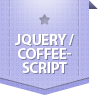
<style>
.page{position:relative;width:100px;height:100px;background:#ffffff}
.page>*{position:absolute;margin:0}
.t1{font:15px/14px "MyriadPro-Bold";letter-spacing:-0.025em;color:#ffffff;text-transform:uppercase}
</style>
<div class="page">
<p class="t1" style="left:15px;top:34px;width:59px;height:39px;text-align:center">jQuery / Coffee-Script</p>
</div>
